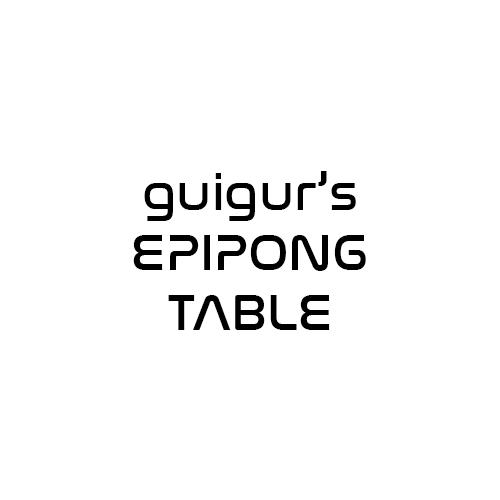
<style>
.page{position:relative;width:500px;height:500px;background:#ffffff}
.page>*{position:absolute;margin:0}
.t1{font:12px "NasalizationRg-Regular";color:#000000}
</style>
<div class="page">
<p class="t1" style="left:133px;top:171px;width:233px;height:159px;text-align:center">guigur’s<br>EPIPONG<br>TABLE</p>
</div>
